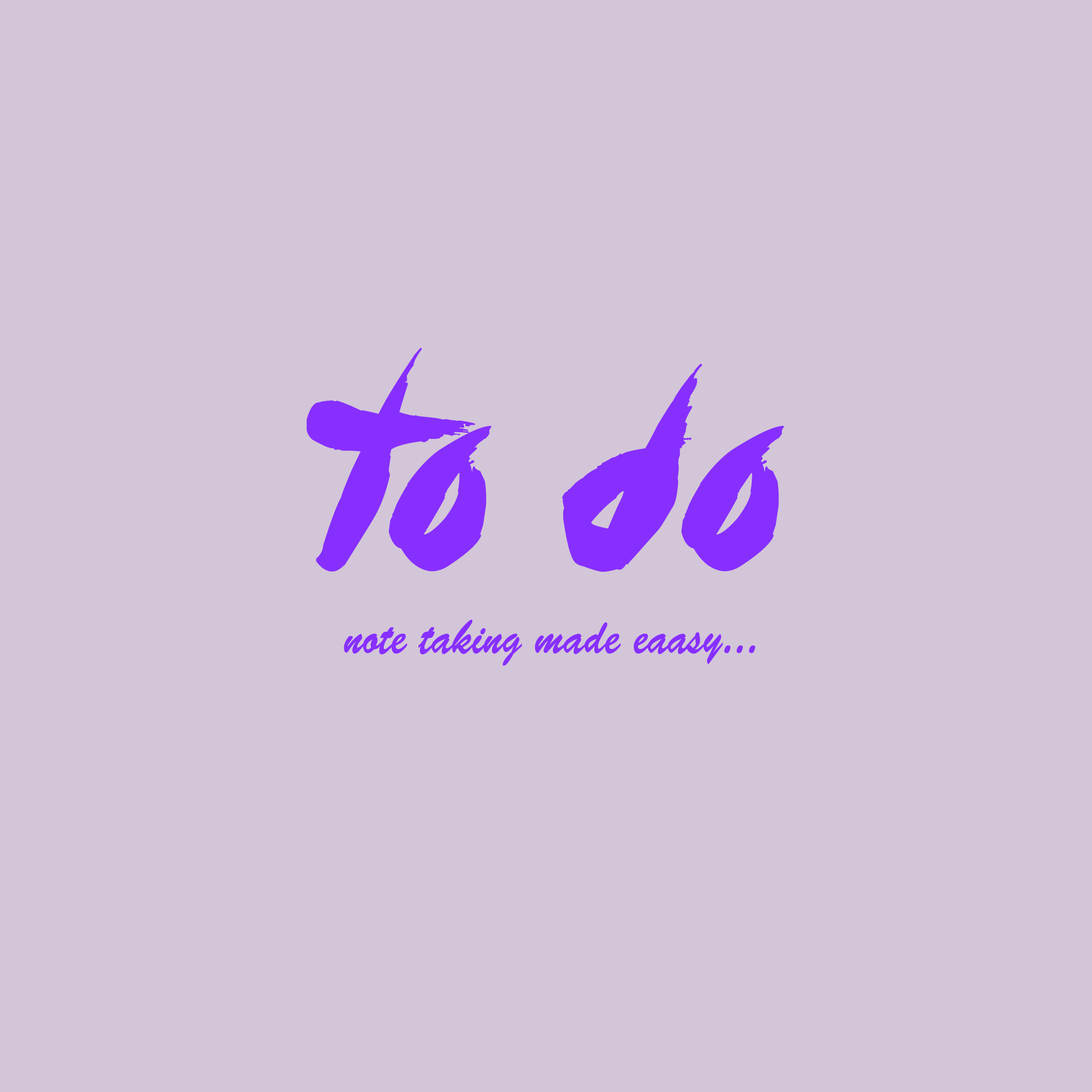
<style>
.page{position:relative;width:1092px;height:1092px;background:#d3c6d8}
.page>*{position:absolute;margin:0}
.t1{font:339.6px "AsylumMansion";color:#872fff;scale:0.81 1}
.t2{font:50.7px "BrushScriptStd";color:#872fff;scale:0.81 1}
</style>
<div class="page">
<p class="t1" style="left:307px;top:348px;width:477px;height:224px">to do</p>
<p class="t2" style="left:344px;top:620px;width:411px;height:46px">note taking made eaasy...</p>
</div>
